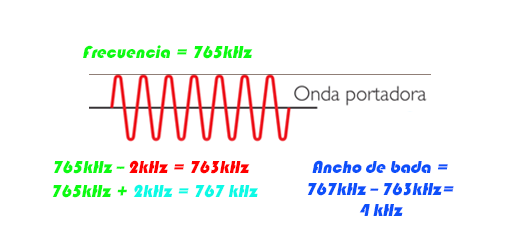
<style>
.page{position:relative;width:517px;height:229px;background:#ffffff}
.page>*{position:absolute;margin:0}
.t1{font:18px "Bauhaus93";letter-spacing:-0.01em;color:#0dfa13;font-style:italic}
.t2{font:18px "Bauhaus93";letter-spacing:-0.01em;color:#ff0000;font-style:italic}
.t3{font:18px "Bauhaus93";letter-spacing:-0.01em;color:#0d50fa;font-style:italic}
.t4{font:18px "Bauhaus93";letter-spacing:-0.01em;color:#0dfae6;font-style:italic}
</style>
<div class="page">
<p class="t1" style="left:83px;top:45px;width:170px;height:14px">Frecuencia = 765kHz</p>
<p class="t2" style="left:54px;top:160px;width:196px;height:14px"><span class="t1">765kHz -- </span>2kHz = 763kHz</p>
<p class="t3" style="left:307px;top:160px;width:147px;height:56px;text-align:center">Ancho de bada = <br>767kHz -- 763kHz=<br>4 kHz</p>
<p class="t4" style="left:52px;top:184px;width:206px;height:14px"><span class="t1">765kHz + </span>2kHz = 767 kHz</p>
</div>
